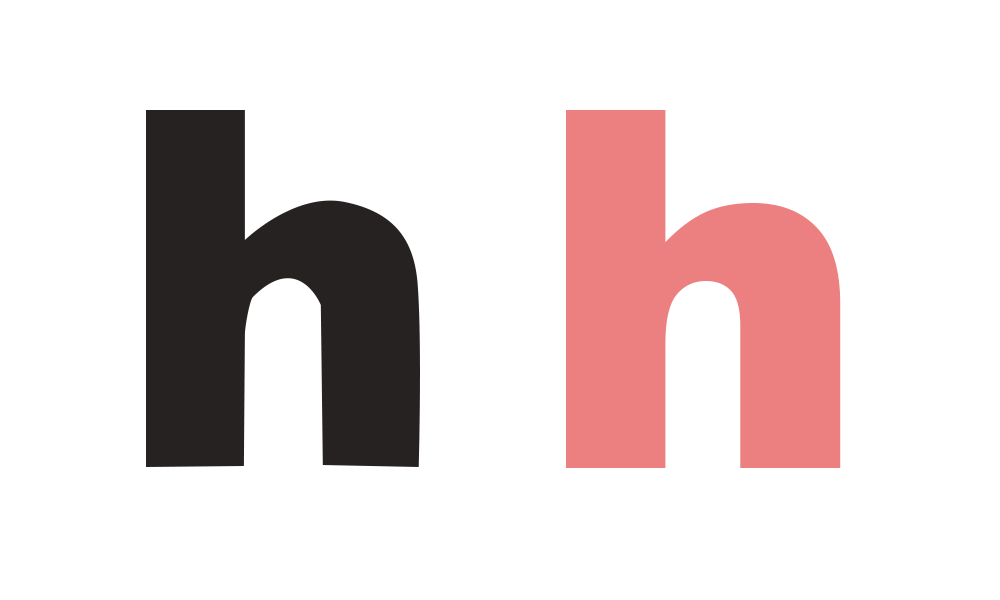
<style>
.page{position:relative;width:1000px;height:600px;background:#ffffff}
.page>*{position:absolute;margin:0}
.t1{font:500px "Arial-Black";color:#ec7f7f}
</style>
<div class="page">
<p class="t1" style="left:566px;top:110px;width:275px;height:358px">h</p>
</div>
